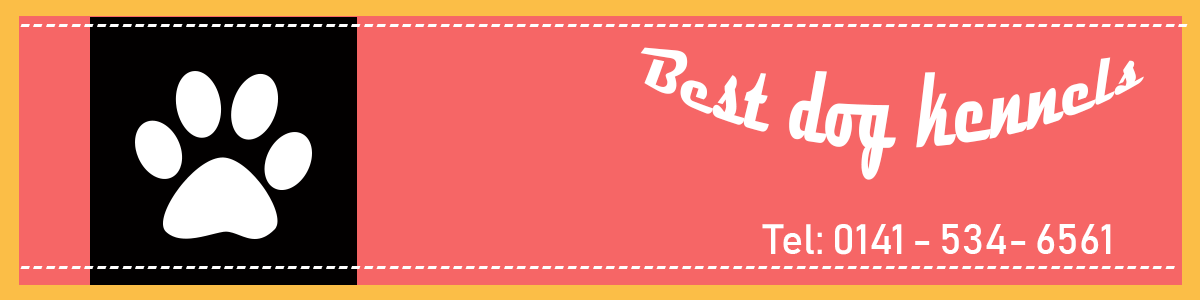
<style>
.page{position:relative;width:1200px;height:300px;background:#f66666}
.page>*{position:absolute;margin:0}
.t1{font:25px "Magneto-Bold";color:#ffffff}
.t2{font:47.8px "Magneto-Bold";color:#ffffff;scale:1.14 1}
.t3{font:41.7px "Bahnschrift";color:#ffffff}
</style>
<div class="page">
<p class="t1" style="left:20px;top:24px;width:1168px;height:3px">--------------------------------------------------------------------------------------------</p>
<p class="t2" style="left:640px;top:47px;width:504px;height:133px">Best dog kennels</p>
<p class="t3" style="left:762px;top:224px;width:349px;height:31px">Tel: 0141 - 534- 6561</p>
<p class="t1" style="left:20px;top:266px;width:1155px;height:3px">-------------------------------------------------------------------------------------------</p>
</div>
